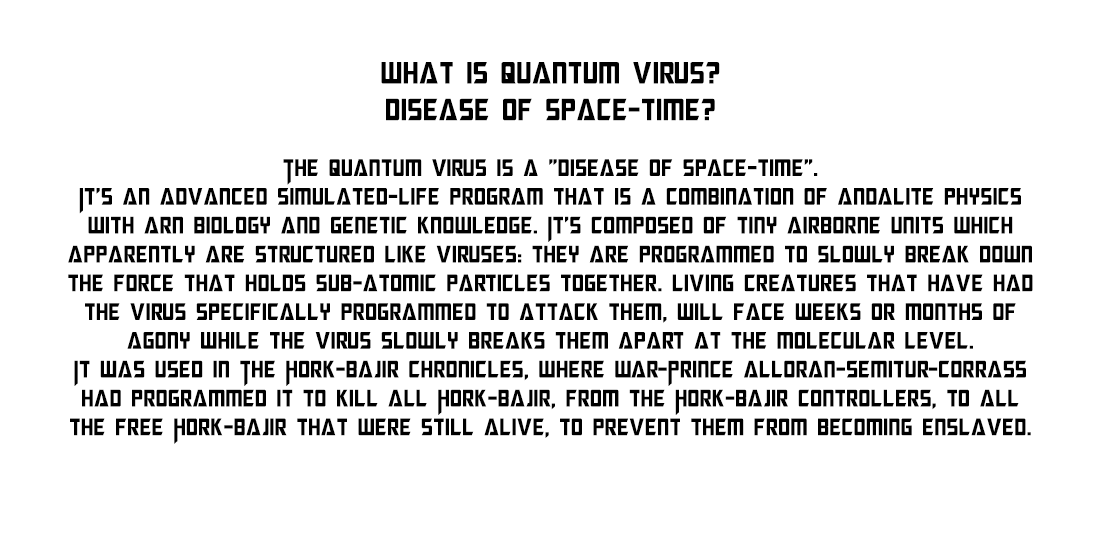
<style>
.page{position:relative;width:1100px;height:550px;background:#ffffff}
.page>*{position:absolute;margin:0}
.t1{font:30.8px "MegatronCondensed";color:#000000}
.t2{font:24px "MegatronCondensed";color:#000000}
</style>
<div class="page">
<p class="t1" style="left:381px;top:62px;width:339px;height:59px;text-align:center">what is quantum virus?<br>disease of space-time?</p>
<p class="t2" style="left:68px;top:159px;width:965px;height:285px;text-align:center">The Quantum Virus is a "disease of space-time". <br>It's an advanced simulated-life program that is a combination of Andalite physics <br>with Arn biology and genetic knowledge. It's composed of tiny airborne units which <br>apparently are structured like viruses: they are programmed to slowly break down <br>the force that holds sub-atomic particles together. Living creatures that have had <br>the virus specifically programmed to attack them, will face weeks or months of <br>agony while the virus slowly breaks them apart at the molecular level. <br>It was used in The Hork-Bajir Chronicles, where War-Prince Alloran-Semitur-Corrass <br>had programmed it to kill all Hork-Bajir, from the Hork-Bajir Controllers, to all <br>the free Hork-Bajir that were still alive, to prevent them from becoming enslaved.</p>
</div>
